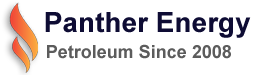
<style>
.page{position:relative;width:258px;height:75px;background:#ffffff}
.page>*{position:absolute;margin:0}
.t1{font:28px "Arial-BoldMT";color:#0e0c34}
.t2{font:18px "Arial-BoldMT";color:#5c5c5c}
</style>
<div class="page">
<p class="t1" style="left:45px;top:12px;width:206px;height:26px">Panther Energy</p>
<p class="t2" style="left:47px;top:44px;width:184px;height:15px">Petroleum Since 2008</p>
</div>
